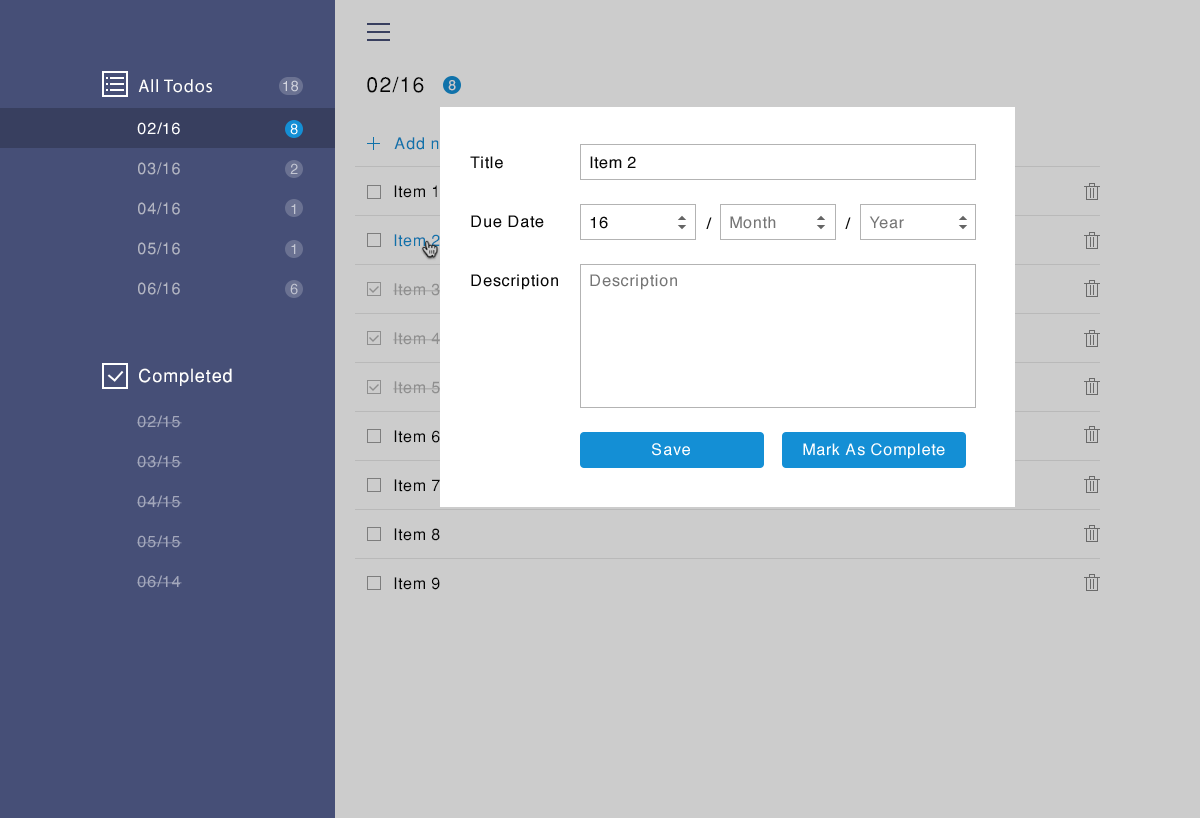
<style>
.page{position:relative;width:1200px;height:818px;background:#cccccc}
.page>*{position:absolute;margin:0}
.t1{font:21px "Helvetica-Normal";letter-spacing:0.05em;color:#050505}
.t2{font:18px "MyriadPro-Regular";letter-spacing:0.05em;color:#ffffff}
.t3{font:14px "Helvetica";letter-spacing:0.05em;color:#d3d5df}
.t4{font:14px "Helvetica-Normal";letter-spacing:0.05em;color:#cccccc}
.t5{font:16px "Helvetica";letter-spacing:0.05em;color:#ffffff}
.t6{font:14px/40px "Helvetica";letter-spacing:0.05em;color:#c4c7d3}
.t7{font:14px "Helvetica";letter-spacing:0.05em;color:#ffffff}
.t8{font:16px "Helvetica-Normal";letter-spacing:0.05em}
.t9{font:16px/59px "Helvetica";letter-spacing:0.05em;color:#060606}
.t10{font:16px "Helvetica";letter-spacing:0.05em;color:#070707}
.t11{font:16px/40px "Helvetica-Normal";letter-spacing:0.05em;color:#b2b5c3}
.t12{font:16px/49px "Helvetica-Normal";letter-spacing:0.05em}
.t13{font:16px "Helvetica";letter-spacing:0.05em;color:#757575}
.t14{font:18px "Helvetica-Normal";letter-spacing:0.05em;color:#ffffff}
.t15{font:16px/40px "Helvetica";letter-spacing:0.05em;color:#a3a7bb}
</style>
<div class="page">
<p class="t1" style="left:367px;top:76px;width:57px;height:17px">02/16</p>
<p class="t2" style="left:138px;top:79px;width:74px;height:14px">All Todos</p>
<p class="t3" style="left:283px;top:80px;width:15px;height:12px">18</p>
<p class="t4" style="left:448px;top:80px;width:8px;height:11px">8</p>
<p class="t5" style="left:137px;top:122px;width:43px;height:13px">02/16</p>
<p class="t6" style="left:290px;top:123px;width:8px;height:172px;text-align:center">8<br>2<br>1<br>1<br>6</p>
<p class="t7" style="left:290px;top:123px;width:8px;height:12px">8</p>
<p class="t8" style="left:394px;top:137px;width:112px;height:13px">Add new to do</p>
<p class="t9" style="left:470px;top:156px;width:88px;height:134px">Title<br>Due Date<br>Description</p>
<p class="t10" style="left:590px;top:156px;width:46px;height:13px">Item 2</p>
<p class="t11" style="left:138px;top:162px;width:42px;height:133px">03/16<br>04/16<br>05/16<br>06/16</p>
<p class="t12" style="left:393px;top:185px;width:49px;height:405px">Item 1<br>Item 2<br>Item 3<br>Item 4<br>Item 5<br>Item 6<br>Item 7<br>Item 8<br>Item 9</p>
<p class="t10" style="left:590px;top:216px;width:18px;height:13px">16</p>
<p class="t10" style="left:706px;top:217px;width:6px;height:12px">/</p>
<p class="t13" style="left:730px;top:216px;width:46px;height:13px">Month</p>
<p class="t10" style="left:845px;top:217px;width:6px;height:12px">/</p>
<p class="t13" style="left:869px;top:216px;width:35px;height:13px">Year</p>
<p class="t13" style="left:590px;top:274px;width:87px;height:16px">Description</p>
<p class="t14" style="left:139px;top:368px;width:93px;height:18px">Completed</p>
<p class="t15" style="left:137px;top:415px;width:45px;height:173px">02/15<br>03/15<br>04/15<br>05/15<br>06/14</p>
<p class="t5" style="left:652px;top:443px;width:38px;height:13px">Save</p>
<p class="t5" style="left:803px;top:443px;width:142px;height:16px">Mark As Complete</p>
</div>
